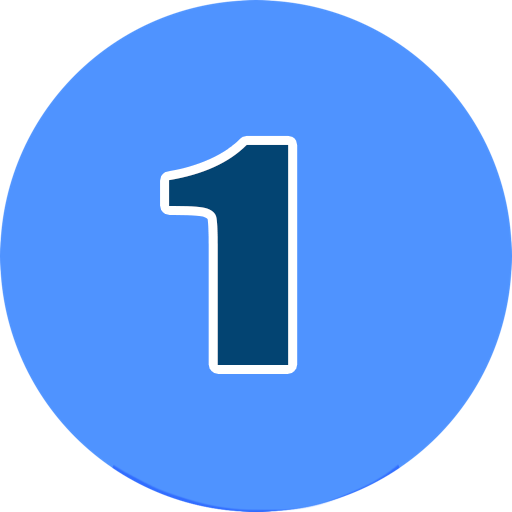
<style>
.page{position:relative;width:512px;height:512px;background:#4f93ff}
.page>*{position:absolute;margin:0}
.t1{font:278.2px "Impact";color:#034472;scale:1.28 1}
</style>
<div class="page">
<p class="t1" style="left:169px;top:144px;width:120px;height:221px">1</p>
</div>
